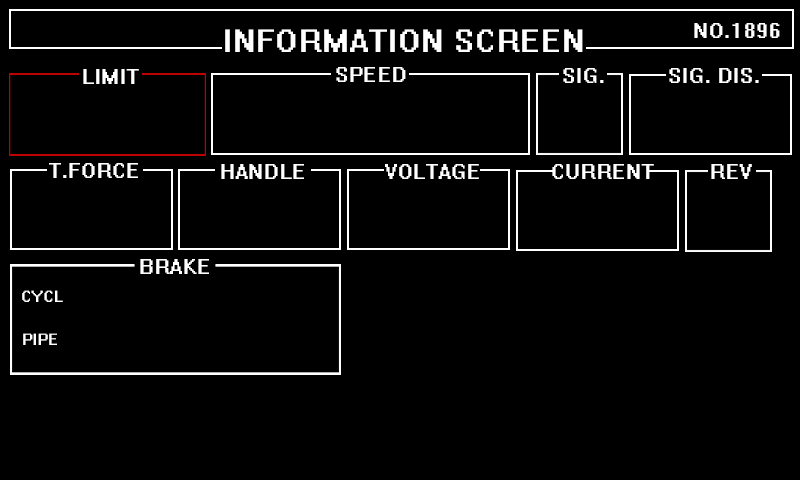
<style>
.page{position:relative;width:800px;height:480px;background:#000000}
.page>*{position:absolute;margin:0}
.t1{font:36px "System";letter-spacing:0.025em;color:#ffffff}
.t2{font:24px "System";letter-spacing:0.025em;color:#ffffff}
.t3{font:18px "System";letter-spacing:0.025em;color:#ffffff}
</style>
<div class="page">
<p class="t1" style="left:225px;top:29px;width:358px;height:23px">INFORMATION SCREEN</p>
<p class="t2" style="left:694px;top:23px;width:86px;height:15px">NO.1896</p>
<p class="t2" style="left:83px;top:69px;width:56px;height:15px">LIMIT</p>
<p class="t2" style="left:336px;top:67px;width:70px;height:15px">SPEED</p>
<p class="t2" style="left:563px;top:68px;width:41px;height:15px">SIG.</p>
<p class="t2" style="left:669px;top:68px;width:90px;height:15px">SIG. DIS.</p>
<p class="t2" style="left:49px;top:163px;width:89px;height:15px">T.FORCE</p>
<p class="t2" style="left:221px;top:164px;width:83px;height:15px">HANDLE</p>
<p class="t2" style="left:385px;top:164px;width:94px;height:15px">VOLTAGE</p>
<p class="t2" style="left:552px;top:164px;width:102px;height:15px">CURRENT</p>
<p class="t2" style="left:711px;top:164px;width:41px;height:15px">REV</p>
<p class="t2" style="left:140px;top:259px;width:69px;height:15px">BRAKE</p>
<p class="t3" style="left:22px;top:290px;width:41px;height:12px">CYCL</p>
<p class="t3" style="left:23px;top:333px;width:34px;height:12px">PIPE</p>
</div>
